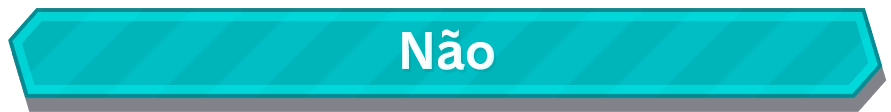
<style>
.page{position:relative;width:891px;height:112px;background:#00bec4}
.page>*{position:absolute;margin:0}
.t1{font:48px "RodinPro-B";color:#fffeff}
</style>
<div class="page">
<p class="t1" style="left:402px;top:29px;width:92px;height:41px">Não</p>
</div>
